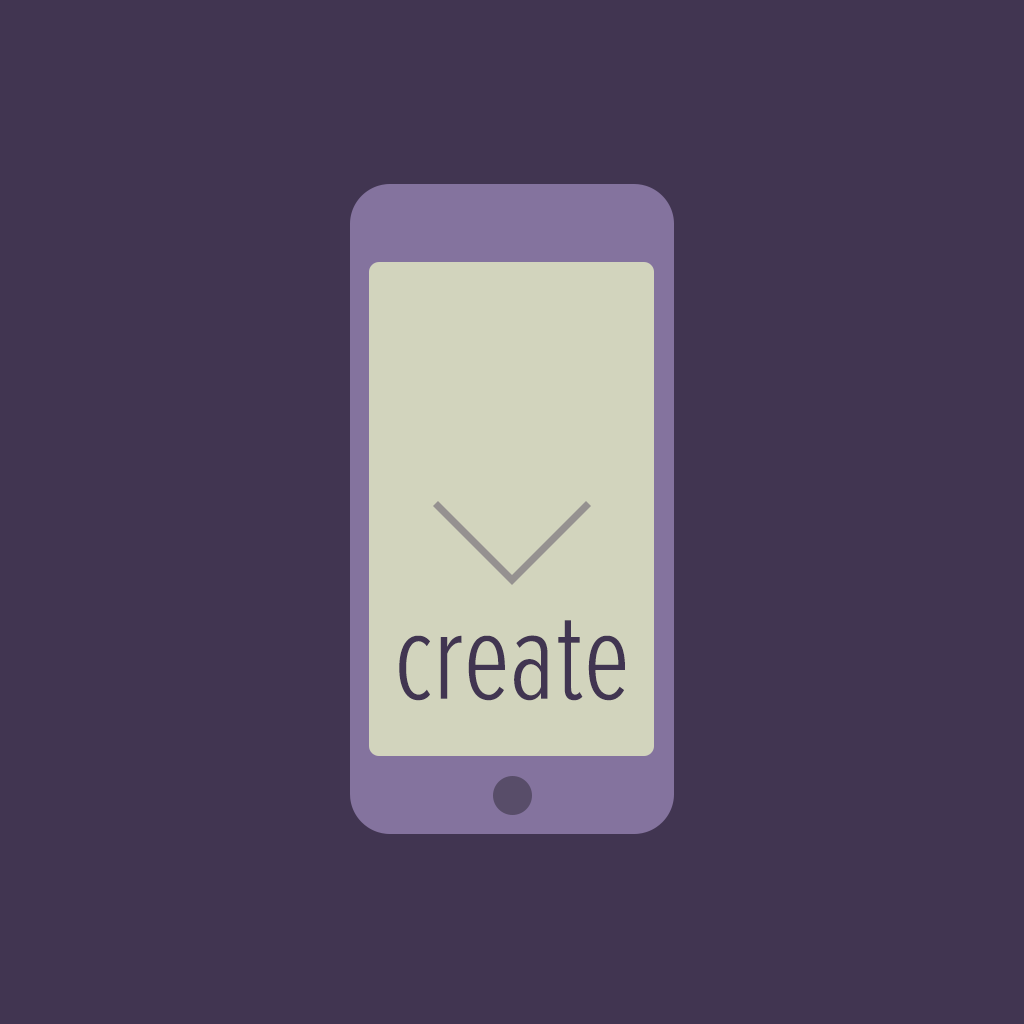
<style>
.page{position:relative;width:1024px;height:1024px;background:#413551}
.page>*{position:absolute;margin:0}
.t1{font:127.5px "ProximaNovaExCn-Light";color:#413551}
</style>
<div class="page">
<p class="t1" style="left:399px;top:620px;width:226px;height:81px">create</p>
</div>
